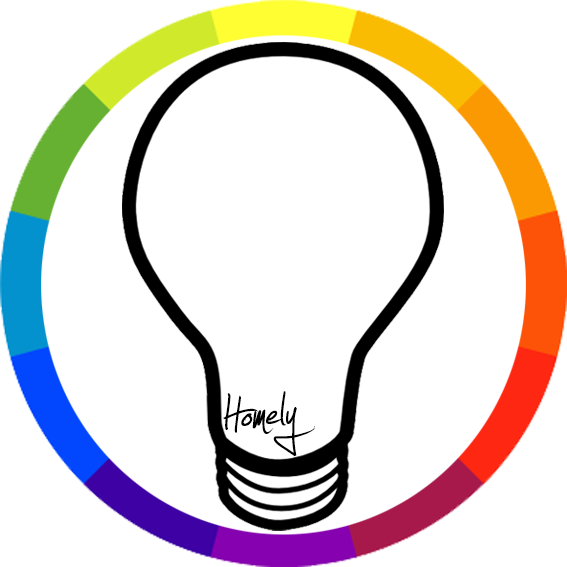
<style>
.page{position:relative;width:567px;height:567px;background:#ffffff}
.page>*{position:absolute;margin:0}
.t1{font:100px "JellykaEstryasHandwriting";color:#000000}
</style>
<div class="page">
<p class="t1" style="left:223px;top:391px;width:92px;height:66px;rotate:-5deg">Homely</p>
</div>
